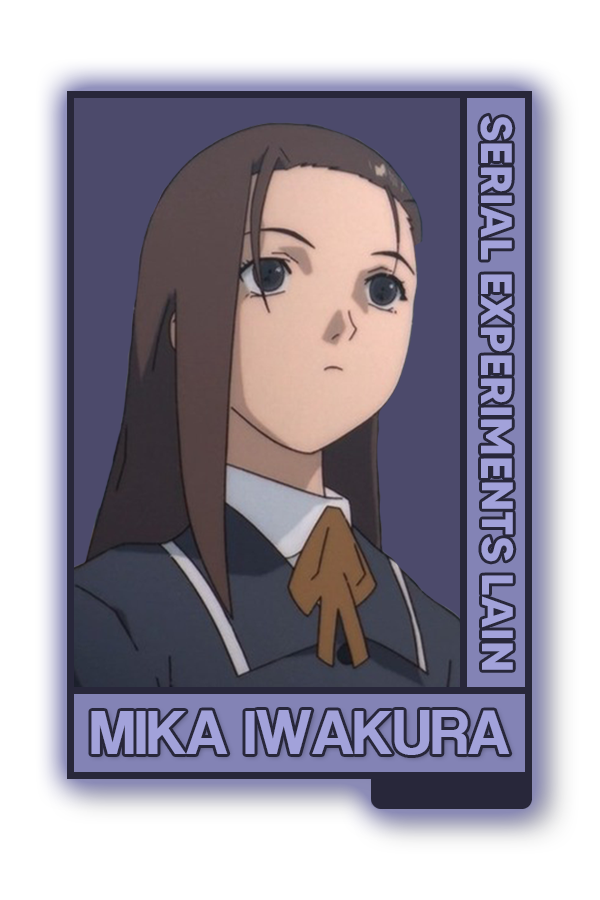
<style>
.page{position:relative;width:600px;height:900px;background:#ffffff}
.page>*{position:absolute;margin:0}
.t1{font:43.8px "MADETOMMY-Bold";color:#a2a2da}
.t2{font:65px "CoolveticaRg-Regular";color:#a2a2da}
</style>
<div class="page">
<p class="t1" style="left:480px;top:115px;width:34px;height:555px;rotate:90deg">SERIAL EXPERIMENTS LAIN</p>
<p class="t2" style="left:91px;top:710px;width:419px;height:45px">MIKA IWAKURA</p>
</div>
